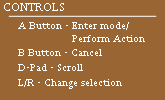
<style>
.page{position:relative;width:165px;height:100px;background:#996633}
.page>*{position:absolute;margin:0}
.t1{font:11px "Sylfaen";color:#ffffff}
</style>
<div class="page">
<p class="t1" style="left:18px;top:22px;width:127px;height:20px">A Button - Enter mode/<br>                  Perform Action</p>
<p class="t1" style="left:18px;top:49px;width:84px;height:7px">B Button - Cancel</p>
<p class="t1" style="left:18px;top:64px;width:65px;height:7px">D-Pad - Scroll</p>
<p class="t1" style="left:18px;top:79px;width:104px;height:10px">L/R - Change selection</p>
</div>
